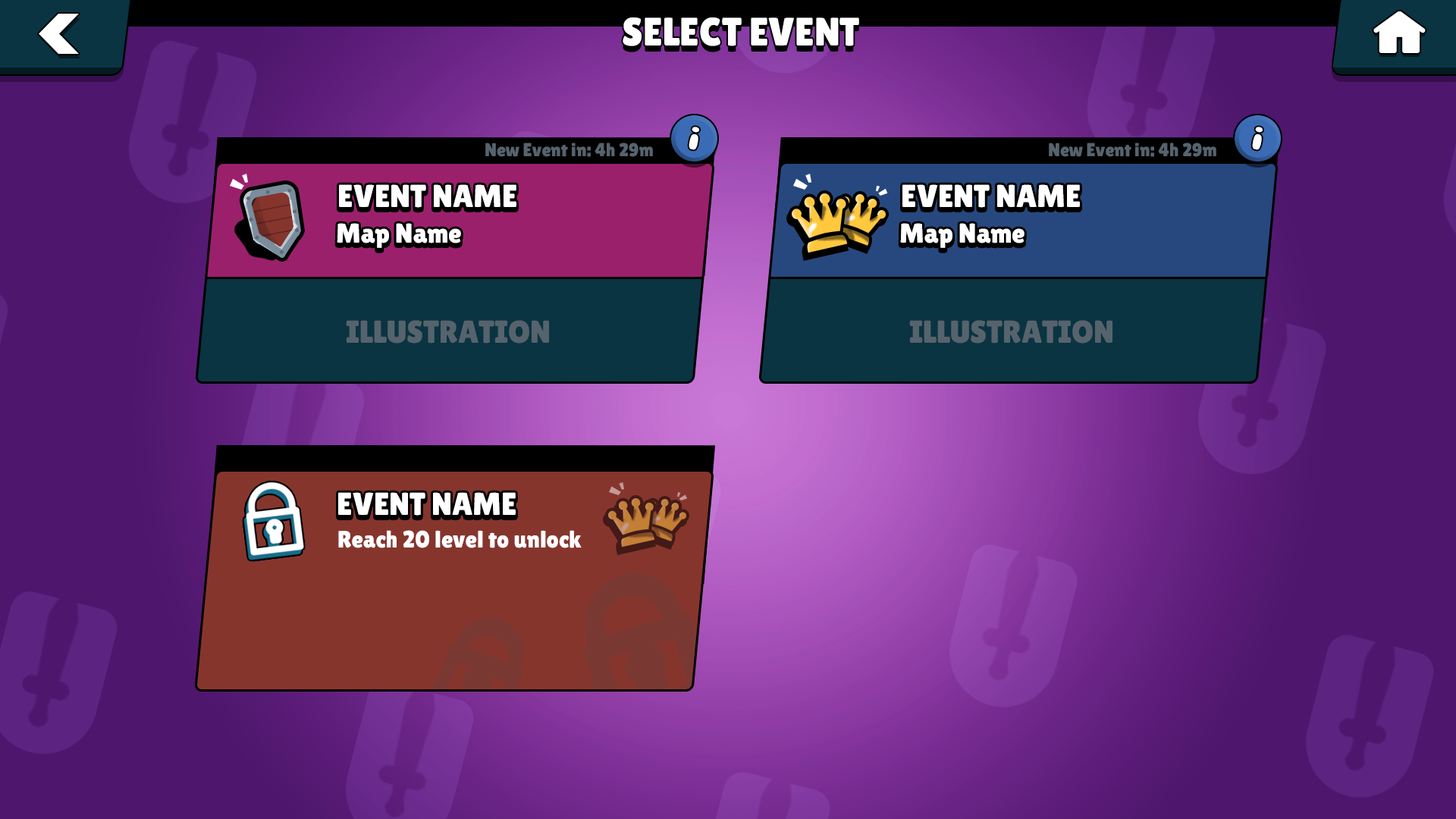
<style>
.page{position:relative;width:1456px;height:819px}
.page>*{position:absolute;margin:0}
.t1{font:39.6px "LilitaOne";color:#ffffff}
.t2{font:34.1px "Albus";color:#ffffff;scale:1.44 1}
.t3{font:18.5px "LilitaOne";color:#56636d}
.t4{font:31.7px "LilitaOne";color:#ffffff}
.t5{font:27.3px "LilitaOne"}
.t6{font:27.3px "LilitaOne";color:#ffffff}
.t7{font:31.7px "LilitaOne";color:#56636d}
.t8{font:24px "LilitaOne";color:#ffffff}
</style>
<div class="page">
<p class="t1" style="left:623px;top:17px;width:236px;height:29px">SELECT EVENT</p>
<p class="t2" style="left:689px;top:127px;width:10px;height:23px;rotate:12deg">i</p>
<p class="t2" style="left:1252px;top:127px;width:11px;height:23px;rotate:12deg">i</p>
<p class="t3" style="left:485px;top:143px;width:168px;height:14px">New Event in: 4h 29m</p>
<p class="t3" style="left:1049px;top:143px;width:167px;height:14px">New Event in: 4h 29m</p>
<p class="t4" style="left:339px;top:184px;width:177px;height:24px">EVENT NAME</p>
<p class="t4" style="left:902px;top:184px;width:178px;height:24px">EVENT NAME</p>
<p class="t4" style="left:339px;top:187px;width:177px;height:24px">EVENT NAME</p>
<p class="t4" style="left:902px;top:187px;width:178px;height:24px">EVENT NAME</p>
<p class="t5" style="left:337px;top:226px;width:124px;height:25px">Map Name</p>
<p class="t6" style="left:337px;top:223px;width:124px;height:25px">Map Name</p>
<p class="t5" style="left:900px;top:226px;width:124px;height:25px">Map Name</p>
<p class="t6" style="left:900px;top:223px;width:124px;height:25px">Map Name</p>
<p class="t7" style="left:346px;top:320px;width:203px;height:24px">ILLUSTRATION</p>
<p class="t7" style="left:909px;top:320px;width:203px;height:24px">ILLUSTRATION</p>
<p class="t4" style="left:338px;top:495px;width:178px;height:24px">EVENT NAME</p>
<p class="t4" style="left:338px;top:492px;width:178px;height:24px">EVENT NAME</p>
<p class="t8" style="left:338px;top:530px;width:244px;height:18px">Reach 20 level to unlock</p>
</div>
